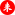
<style>
.page{position:relative;width:15px;height:15px;background:#ff0000}
.page>*{position:absolute;margin:0}
.t1{font:10px "GBWeiBei-Bold";color:#ffffff}
</style>
<div class="page">
<p class="t1" style="left:3px;top:2px;width:9px;height:10px">未</p>
</div>
